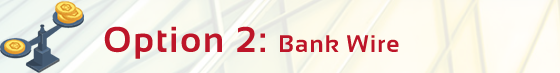
<style>
.page{position:relative;width:560px;height:73px}
.page>*{position:absolute;margin:0}
.t1{font:36px "Sansation-Bold";letter-spacing:0.05em;color:#bd1529}
.t2{font:24px "Sansation-Bold";letter-spacing:0.05em;color:#bd1529}
</style>
<div class="page">
<p class="t1" style="left:104px;top:26px;width:295px;height:33px">Option 2: <span class="t2">Bank Wire</span></p>
</div>
